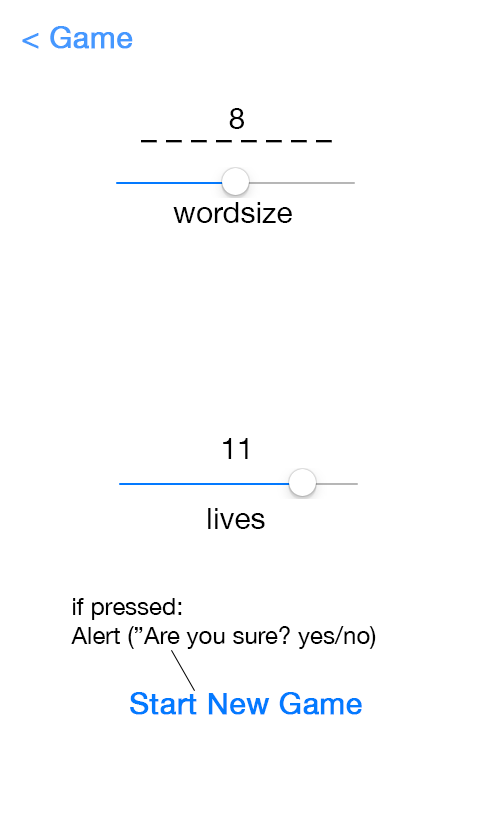
<style>
.page{position:relative;width:480px;height:832px;background:#ffffff}
.page>*{position:absolute;margin:0}
.t1{font:30px "HelveticaNeue";color:#4598ff;font-weight:bold}
.t2{font:30px "HelveticaNeue";color:#000000}
.t3{font:30px "HelveticaNeue";color:#000000;font-weight:bold}
.t4{font:24px "HelveticaNeue";color:#000000}
.t5{font:30px "HelveticaNeue";color:#0379ff;font-weight:bold}
</style>
<div class="page">
<p class="t1" style="left:22px;top:26px;width:111px;height:23px">&lt; Game</p>
<p class="t2" style="left:229px;top:108px;width:15px;height:21px">8</p>
<p class="t3" style="left:141px;top:140px;width:191px;height:3px">_ _ _ _ _ _ _ _</p>
<p class="t2" style="left:173px;top:202px;width:119px;height:21px">wordsize</p>
<p class="t2" style="left:223px;top:438px;width:25px;height:21px">11</p>
<p class="t2" style="left:208px;top:508px;width:57px;height:21px">lives</p>
<p class="t4" style="left:71px;top:598px;width:305px;height:51px">if pressed: <br>Alert (”Are you sure? yes/no)</p>
<p class="t5" style="left:130px;top:692px;width:232px;height:23px">Start New Game</p>
</div>
